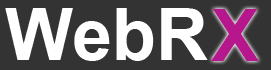
<style>
.page{position:relative;width:271px;height:70px;background:#333333}
.page>*{position:absolute;margin:0}
.t1{font:72px "Arial-BoldMT";color:#ffffff}
.t2{font:72px "Arial-BoldMT";color:#b7178c}
</style>
<div class="page">
<p class="t1" style="left:5px;top:8px;width:203px;height:53px">WebR</p>
<p class="t2" style="left:211px;top:9px;width:48px;height:52px">X</p>
</div>
